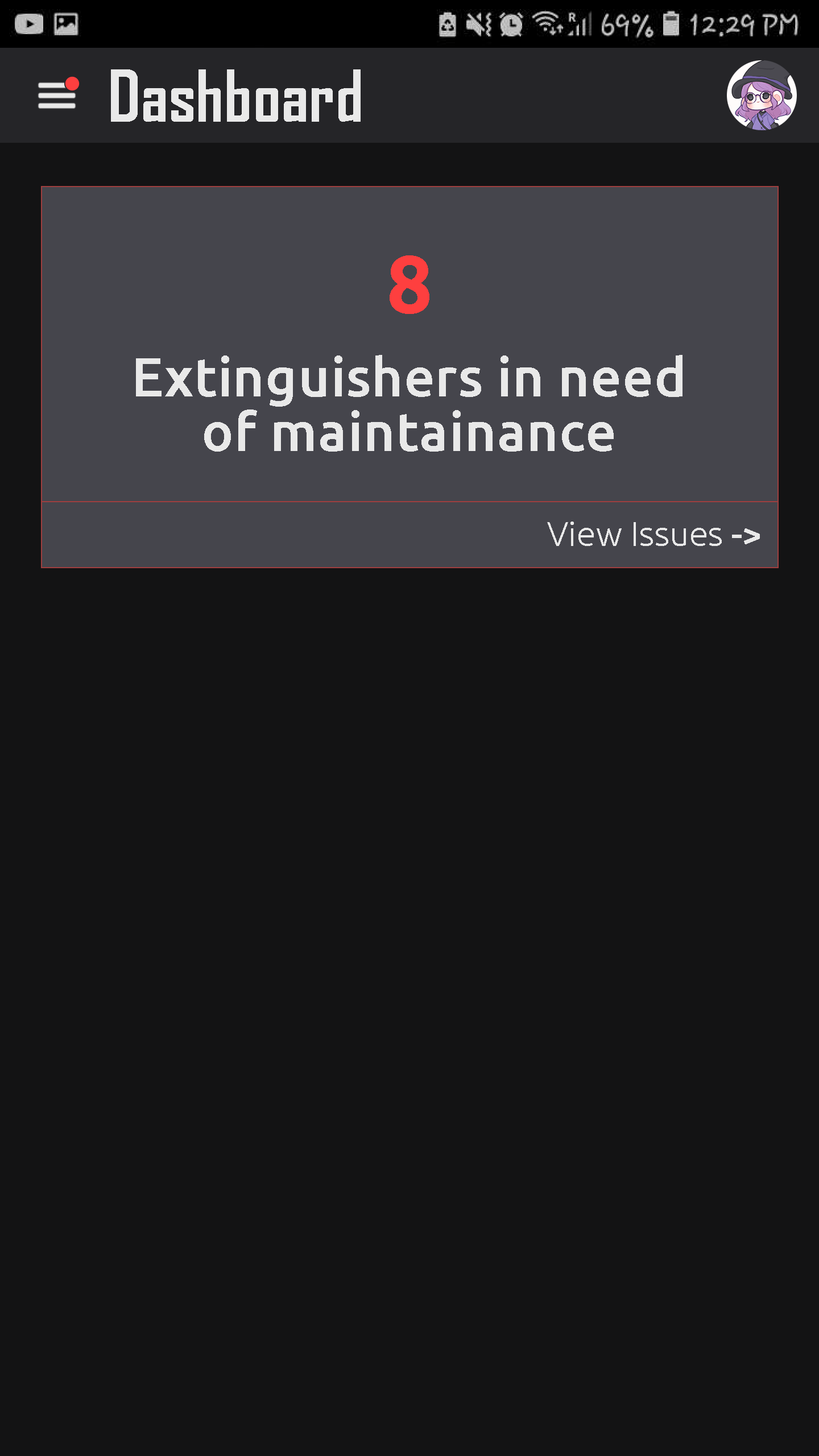
<style>
.page{position:relative;width:819px;height:1456px;background:#131314}
.page>*{position:absolute;margin:0}
.t1{font:68.2px "AgencyFB-Bold";letter-spacing:0.01em;color:#e9e9e9}
.t2{font:80.8px "Ubuntu-Bold";letter-spacing:0.01em;color:#fe3f3f}
.t3{font:54.6px/54.6px "Ubuntu-Medium";letter-spacing:0.01em;color:#e9e9e9}
.t4{font:34.1px "Ubuntu-Light";letter-spacing:0.01em;color:#e9e9e9}
.t5{font:34.1px "Ubuntu-Medium";letter-spacing:0.01em;color:#e9e9e9}
</style>
<div class="page">
<p class="t1" style="left:111px;top:69px;width:250px;height:53px">Dashboard</p>
<p class="t2" style="left:390px;top:255px;width:39px;height:59px">8</p>
<p class="t3" style="left:136px;top:355px;width:546px;height:97px;text-align:center">Extinguishers in need<br>of maintainance</p>
<p class="t4" style="left:547px;top:522px;width:213px;height:24px">View Issues <span class="t5">-&gt;</span></p>
</div>
